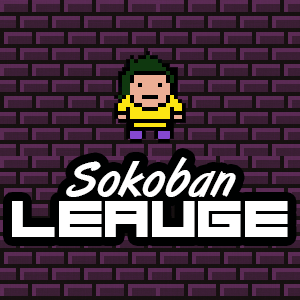
<style>
.page{position:relative;width:300px;height:300px}
.page>*{position:absolute;margin:0}
.t1{font:50.7px/40px "ArtBrush";letter-spacing:0.04em;color:#ffffff}
.t2{font:50.7px/40px "Basicav.2012";letter-spacing:0.04em;color:#ffffff}
</style>
<div class="page">
<p class="t1" style="left:12px;top:157px;width:276px;height:80px;text-align:center">Sokoban<br><span class="t2">Leauge</span></p>
</div>
